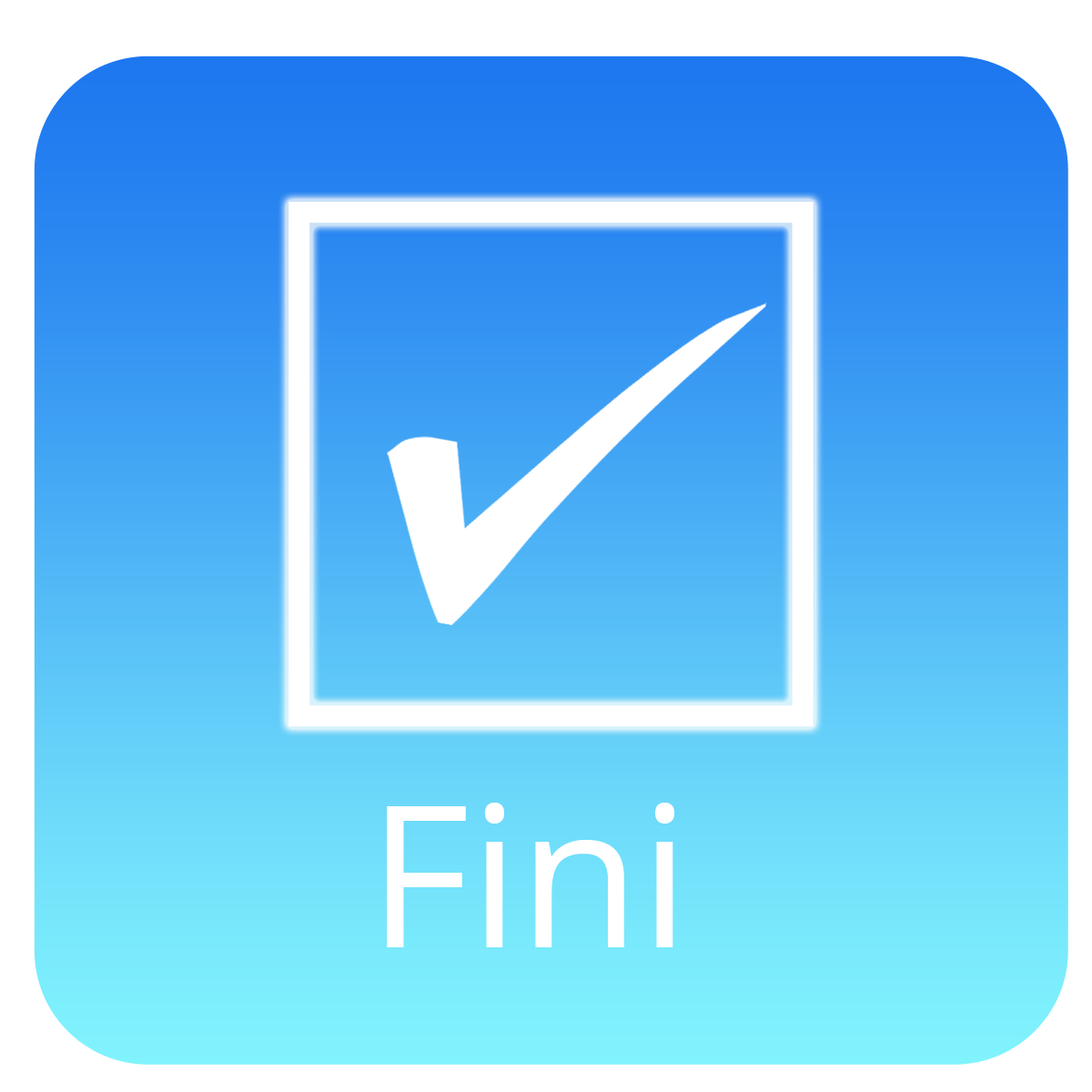
<style>
.page{position:relative;width:1092px;height:1092px}
.page>*{position:absolute;margin:0}
.t1{font:197.2px "OpenSans";color:#ffffff}
</style>
<div class="page">
<p class="t1" style="left:387px;top:803px;width:287px;height:144px">Fini</p>
</div>
